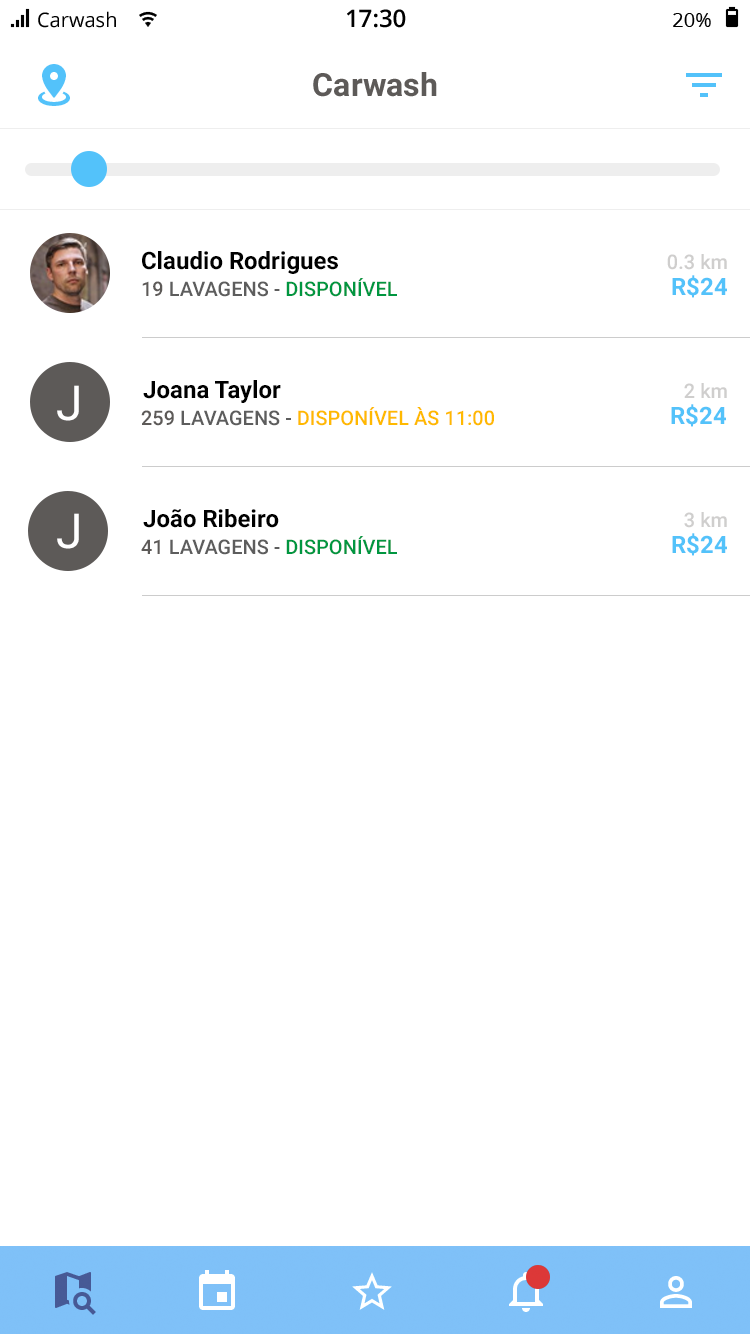
<style>
.page{position:relative;width:750px;height:1334px;background:#ffffff}
.page>*{position:absolute;margin:0}
.t1{font:24px "Roboto-Bold";color:#000000}
.t2{font:20px "Roboto-Medium";color:#cfcecd}
.t3{font:20px "Roboto-Medium";color:#5d5d5d;text-transform:uppercase}
.t4{font:20px "Roboto-Medium";color:#5d5a58;text-transform:uppercase}
.t5{font:20px "Roboto-Medium";color:#009640;text-transform:uppercase}
.t6{font:24px "Roboto-Bold";color:#53c2fa}
.t7{font:48px "Roboto-Regular";color:#ffffff}
.t8{font:20px "Roboto-Medium";color:#ffb900;text-transform:uppercase}
</style>
<div class="page">
<p class="t1" style="left:142px;top:251px;width:196px;height:23px">Claudio Rodrigues</p>
<p class="t2" style="left:667px;top:254px;width:60px;height:16px">0.3 km</p>
<p class="t3" style="left:142px;top:278px;width:255px;height:19px"><span class="t4">19 </span>Lavagens - <span class="t5">Disponível</span></p>
<p class="t6" style="left:672px;top:275px;width:55px;height:23px">R$24</p>
<p class="t7" style="left:57px;top:385px;width:22px;height:36px">J</p>
<p class="t1" style="left:143px;top:380px;width:138px;height:23px">Joana Taylor</p>
<p class="t2" style="left:684px;top:383px;width:43px;height:15px">2 km</p>
<p class="t8" style="left:141px;top:407px;width:353px;height:19px"><span class="t4">259 </span><span class="t3">Lavagens - </span>Disponível às 11:00</p>
<p class="t6" style="left:671px;top:404px;width:55px;height:23px">R$24</p>
<p class="t1" style="left:143px;top:509px;width:136px;height:19px">João Ribeiro</p>
<p class="t7" style="left:57px;top:513px;width:22px;height:36px">J</p>
<p class="t2" style="left:684px;top:512px;width:43px;height:16px">3 km</p>
<p class="t6" style="left:672px;top:533px;width:55px;height:23px">R$24</p>
<p class="t3" style="left:141px;top:536px;width:256px;height:19px"><span class="t4">41 </span>Lavagens - <span class="t5">Disponível</span></p>
</div>
